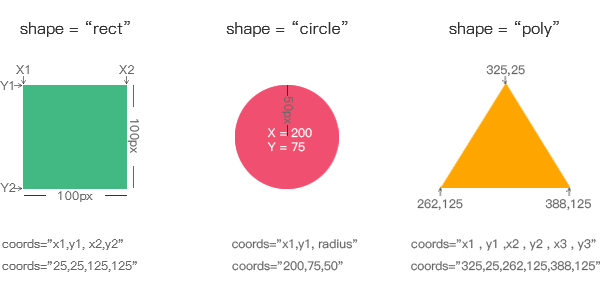
<style>
.page{position:relative;width:600px;height:300px;background:#ffffff}
.page>*{position:absolute;margin:0}
.t1{font:16px "PingFang-SC-Medium";color:#333333}
.t2{font:12px "PingFang-SC-Medium";color:#666666;text-transform:uppercase}
.t3{font:12px "PingFang-SC-Medium";color:#666666}
.t4{font:12px "PingFang-SC-Medium";color:#ffffff;text-transform:uppercase}
</style>
<div class="page">
<p class="t1" style="left:20px;top:21px;width:110px;height:16px">shape = “rect”</p>
<p class="t1" style="left:226px;top:21px;width:122px;height:16px">shape = “circle”</p>
<p class="t1" style="left:449px;top:21px;width:110px;height:16px">shape = “poly”</p>
<p class="t2" style="left:16px;top:65px;width:13px;height:9px">x1</p>
<p class="t2" style="left:119px;top:65px;width:15px;height:9px">x2</p>
<p class="t2" style="left:486px;top:65px;width:39px;height:11px">325,25</p>
<p class="t2" style="left:0px;top:81px;width:13px;height:9px">y1</p>
<p class="t3" style="left:281px;top:96px;width:13px;height:28px;rotate:90deg">50px</p>
<p class="t3" style="left:127px;top:119px;width:13px;height:34px;rotate:90deg">100px</p>
<p class="t4" style="left:267px;top:128px;width:45px;height:24px">x = 200<br>y = 75</p>
<p class="t2" style="left:0px;top:183px;width:16px;height:9px">y2</p>
<p class="t3" style="left:58px;top:191px;width:35px;height:11px">100px</p>
<p class="t2" style="left:417px;top:199px;width:46px;height:11px">262,125</p>
<p class="t2" style="left:545px;top:199px;width:46px;height:11px">388,125</p>
<p class="t3" style="left:2px;top:239px;width:121px;height:11px">coords="x1,y1, x2,y2"</p>
<p class="t3" style="left:232px;top:239px;width:126px;height:12px">coords="x1,y1, radius"</p>
<p class="t3" style="left:411px;top:239px;width:185px;height:12px">coords="x1 , y1 ,x2 , y2 , x3 , y3"</p>
<p class="t3" style="left:2px;top:261px;width:135px;height:11px">coords="25,25,125,125"</p>
<p class="t3" style="left:232px;top:261px;width:111px;height:11px">coords="200,75,50"</p>
<p class="t3" style="left:411px;top:261px;width:190px;height:11px">coords="325,25,262,125,388,125"</p>
</div>
